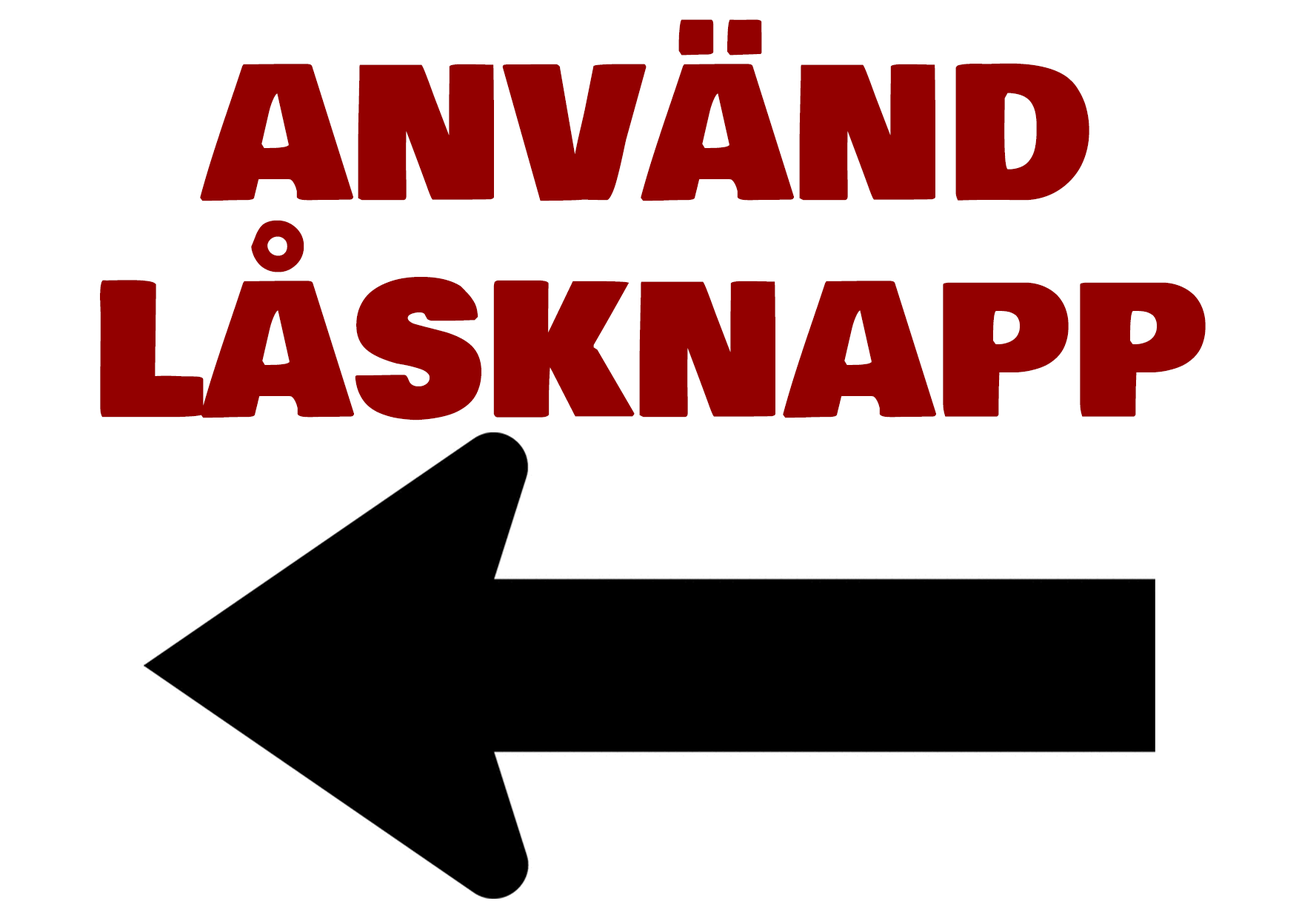
<style>
.page{position:relative;width:1299px;height:918px;background:#ffffff}
.page>*{position:absolute;margin:0}
.t1{font:181.3px "BowlbyOneSC-Regular";letter-spacing:0.01em;color:#930000}
</style>
<div class="page">
<p class="t1" style="left:100px;top:19px;width:1105px;height:402px;text-align:center">ANVÄND<br>LÅSKNAPP</p>
</div>
